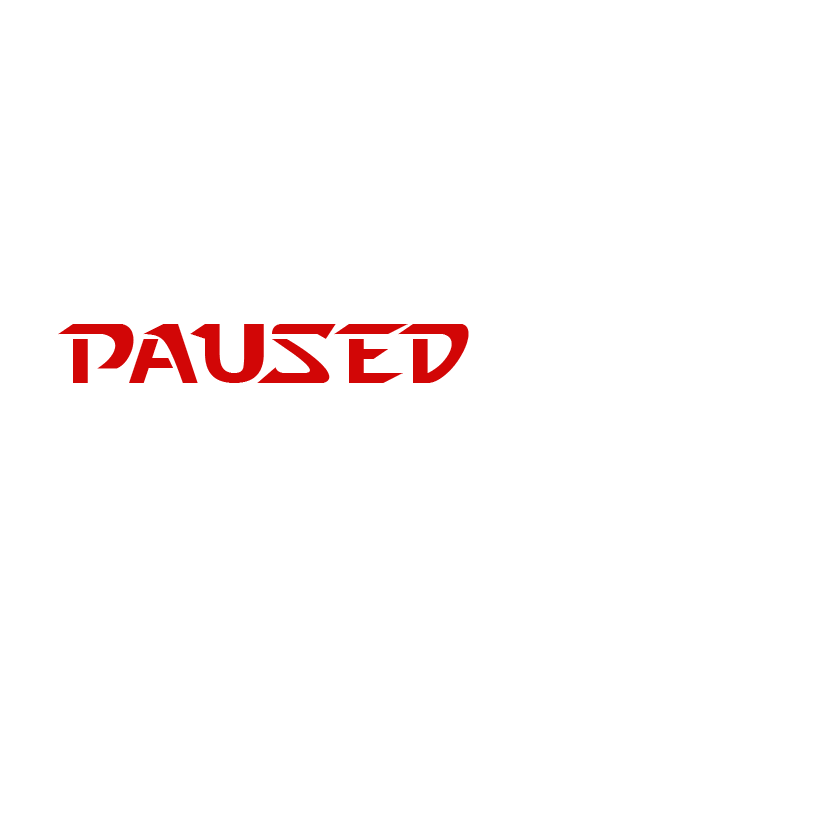
<style>
.page{position:relative;width:836px;height:836px;background:#ffffff}
.page>*{position:absolute;margin:0}
.t1{font:83.7px "StarcraftNormal";color:#d20606}
</style>
<div class="page">
<p class="t1" style="left:58px;top:324px;width:411px;height:59px">Paused</p>
</div>
